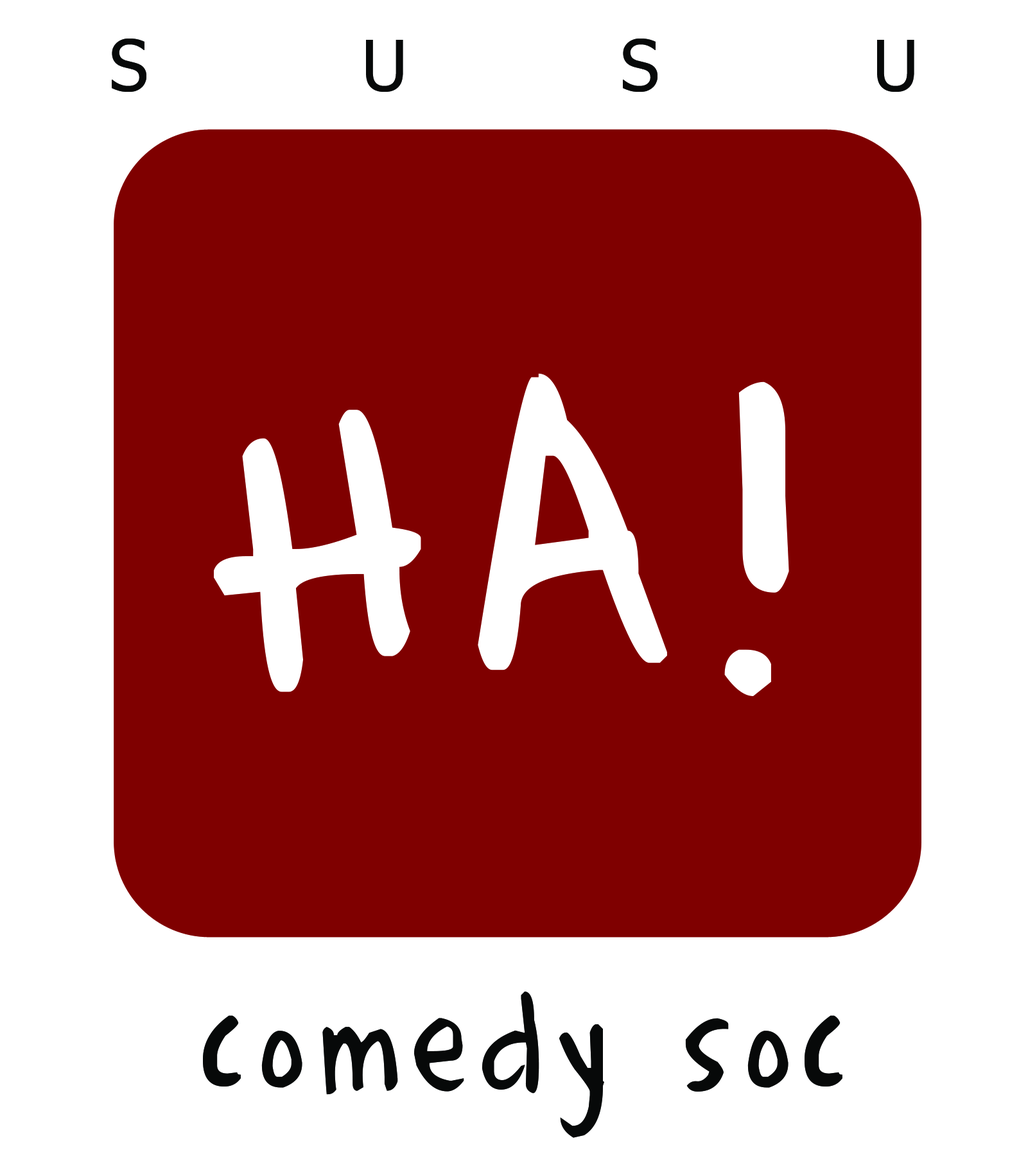
<style>
.page{position:relative;width:1019px;height:1170px;background:#7f0000}
.page>*{position:absolute;margin:0}
.t1{font:69.9px "Tahoma";letter-spacing:0.087em;color:#070909}
.t2{font:487.6px "CompleteinHim";letter-spacing:0.087em;color:#ffffff}
.t3{font:161px "CompleteinHim";letter-spacing:0.09em;color:#070909}
</style>
<div class="page">
<p class="t1" style="left:112px;top:39px;width:802px;height:53px">SUSU</p>
<p class="t2" style="left:214px;top:373px;width:575px;height:323px">HA!</p>
<p class="t3" style="left:203px;top:992px;width:640px;height:146px">comedy soc</p>
</div>
